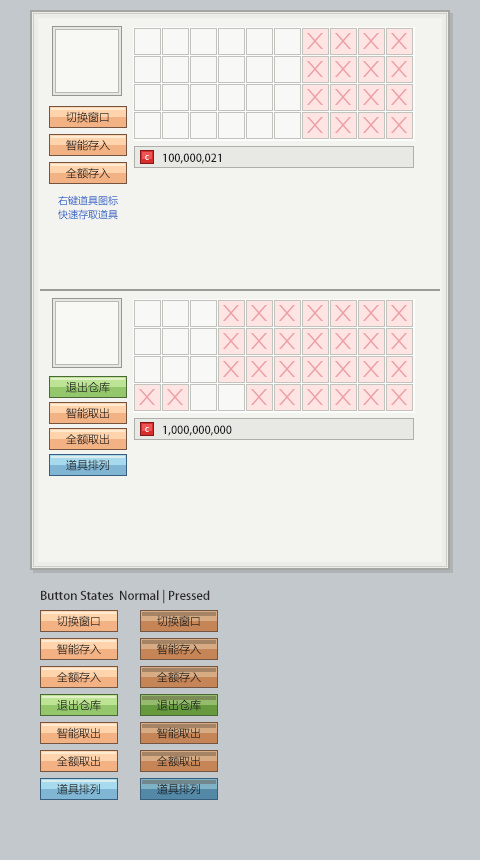
<style>
.page{position:relative;width:480px;height:860px;background:#c3c8cd}
.page>*{position:absolute;margin:0}
.t1{font:11px "MicrosoftYaHei"}
.t2{font:11px "MicrosoftYaHei";color:#191919}
.t3{font:9px "MicrosoftYaHei"}
.t4{font:11px "AdobeHeitiStd-Regular";color:#1e1e1e}
.t5{font:10px "MicrosoftYaHei"}
.t6{font:12px "AdobeHeitiStd-Regular";color:#282828}
</style>
<div class="page">
<p class="t1" style="left:66px;top:111px;width:43px;height:12px">切换窗口</p>
<p class="t2" style="left:66px;top:139px;width:44px;height:12px">智能存入</p>
<p class="t3" style="left:145px;top:155px;width:4px;height:5px">c</p>
<p class="t4" style="left:163px;top:153px;width:58px;height:11px">100,000,021</p>
<p class="t2" style="left:66px;top:167px;width:44px;height:12px">全额存入</p>
<p class="t5" style="left:58px;top:195px;width:60px;height:11px">右键道具图标</p>
<p class="t5" style="left:58px;top:209px;width:60px;height:11px">快速存取道具</p>
<p class="t2" style="left:66px;top:381px;width:44px;height:12px">退出仓库</p>
<p class="t2" style="left:66px;top:407px;width:43px;height:12px">智能取出</p>
<p class="t4" style="left:163px;top:425px;width:69px;height:11px">1,000,000,000</p>
<p class="t1" style="left:66px;top:433px;width:43px;height:12px">全额取出</p>
<p class="t3" style="left:145px;top:427px;width:4px;height:5px">c</p>
<p class="t1" style="left:66px;top:459px;width:43px;height:12px">道具排列</p>
<p class="t6" style="left:41px;top:589px;width:169px;height:15px">Button States  Normal | Pressed</p>
<p class="t1" style="left:57px;top:615px;width:43px;height:12px">切换窗口</p>
<p class="t1" style="left:157px;top:615px;width:43px;height:12px">切换窗口</p>
<p class="t2" style="left:57px;top:643px;width:44px;height:12px">智能存入</p>
<p class="t2" style="left:157px;top:643px;width:44px;height:12px">智能存入</p>
<p class="t2" style="left:57px;top:671px;width:44px;height:12px">全额存入</p>
<p class="t2" style="left:157px;top:671px;width:44px;height:12px">全额存入</p>
<p class="t2" style="left:57px;top:699px;width:44px;height:12px">退出仓库</p>
<p class="t2" style="left:157px;top:699px;width:44px;height:12px">退出仓库</p>
<p class="t2" style="left:57px;top:727px;width:43px;height:12px">智能取出</p>
<p class="t2" style="left:157px;top:727px;width:43px;height:12px">智能取出</p>
<p class="t1" style="left:57px;top:755px;width:43px;height:12px">全额取出</p>
<p class="t1" style="left:157px;top:755px;width:43px;height:12px">全额取出</p>
<p class="t1" style="left:57px;top:783px;width:43px;height:12px">道具排列</p>
<p class="t1" style="left:157px;top:783px;width:43px;height:12px">道具排列</p>
</div>
